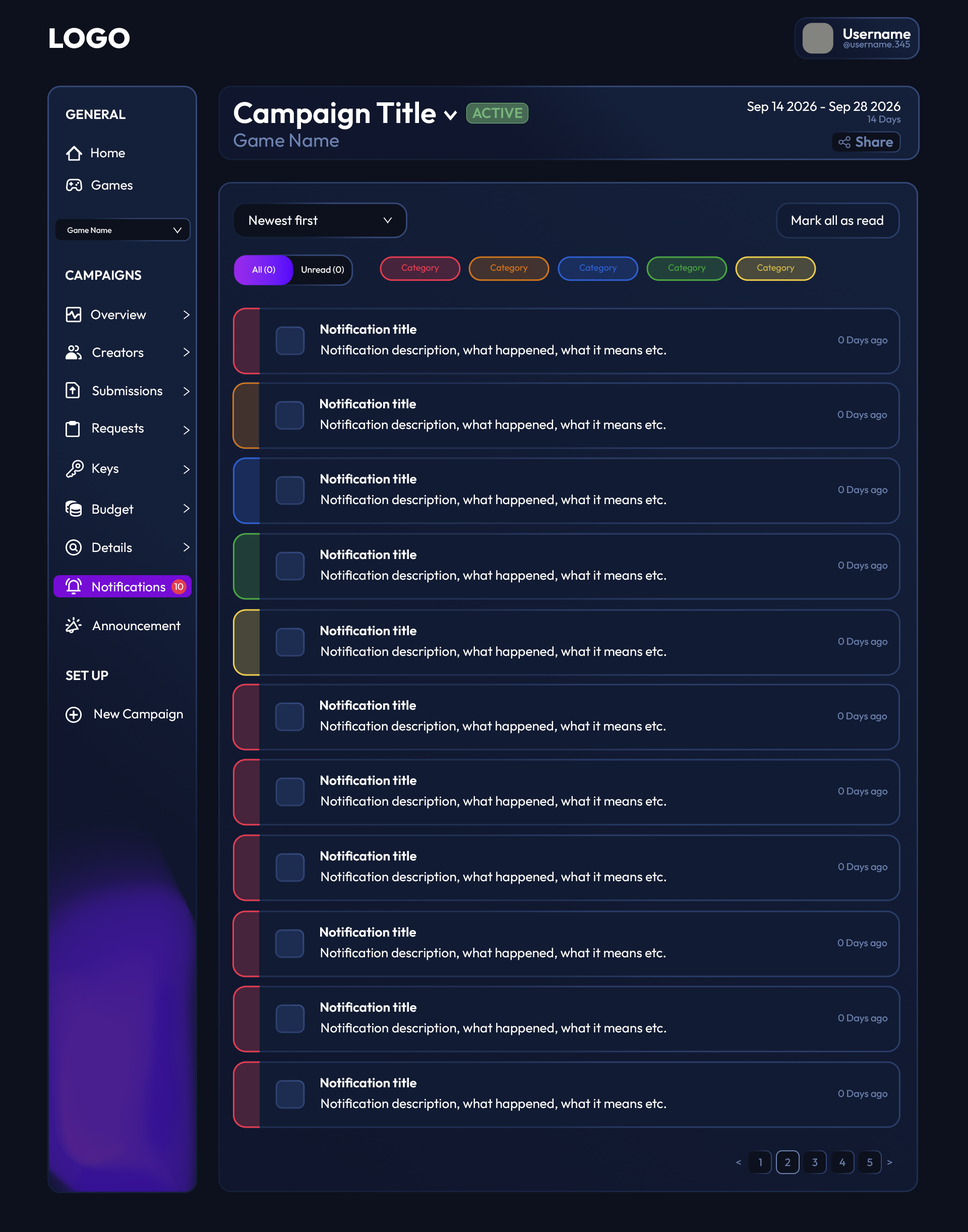
<style>
.page{position:relative;width:968px;height:1232px;background:#111b33}
.page>*{position:absolute;margin:0}
.t1{font:27.6px "Outfit-ExtraBold";color:#ffffff}
.t2{font:14.6px "Outfit-SemiBold";color:#ffffff}
.t3{font:9.4px "Outfit-Regular";color:#6d82b1}
.t4{font:29.4px "Outfit-SemiBold";color:#ffffff}
.t5{font:13.2px "Outfit-Regular";color:#ffffff}
.t6{font:13.2px "Outfit-SemiBold";color:#ffffff}
.t7{font:14.3px "Outfit-SemiBold";color:#78b47a}
.t8{font:9.9px "Outfit-Regular";color:#6d82b1}
.t9{font:18.9px "Outfit-Regular";color:#6d82b1}
.t10{font:14.3px "Outfit-SemiBold";color:#6d82b1}
.t11{font:7.9px "Outfit-Regular";color:#ffffff}
.t12{font:9px "Outfit-Regular";color:#ffffff}
.t13{font:9px "Outfit-Regular";color:#e33d51}
.t14{font:9px "Outfit-Regular";color:#cf751d}
.t15{font:9px "Outfit-Regular";color:#2f60d0}
.t16{font:9px "Outfit-Regular";color:#4aa342}
.t17{font:9px "Outfit-Regular";color:#d1b74a}
.t18{font:9.3px "Outfit-Regular";color:#ffffff}
.t19{font:10.6px "Outfit-Regular";color:#6d82b1}
</style>
<div class="page">
<p class="t1" style="left:49px;top:28px;width:81px;height:20px">LOGO</p>
<p class="t2" style="left:843px;top:28px;width:67px;height:11px">Username</p>
<p class="t3" style="left:843px;top:40px;width:67px;height:8px">@username.345</p>
<p class="t4" style="left:234px;top:101px;width:202px;height:29px">Campaign Title</p>
<p class="t5" style="left:747px;top:101px;width:153px;height:13px">Sep 14 2026 - Sep 28 2026</p>
<p class="t6" style="left:66px;top:109px;width:60px;height:10px">GENERAL</p>
<p class="t7" style="left:472px;top:107px;width:50px;height:11px">ACTIVE</p>
<p class="t8" style="left:867px;top:115px;width:34px;height:10px">14 Days</p>
<p class="t9" style="left:233px;top:133px;width:106px;height:14px">Game Name</p>
<p class="t10" style="left:855px;top:136px;width:38px;height:11px">Share</p>
<p class="t5" style="left:91px;top:148px;width:34px;height:10px">Home</p>
<p class="t5" style="left:91px;top:180px;width:42px;height:10px">Games</p>
<p class="t5" style="left:249px;top:215px;width:69px;height:10px">Newest first</p>
<p class="t5" style="left:791px;top:215px;width:92px;height:10px">Mark all as read</p>
<p class="t11" style="left:67px;top:227px;width:45px;height:6px">Game Name</p>
<p class="t12" style="left:252px;top:266px;width:23px;height:8px">All (0)</p>
<p class="t12" style="left:301px;top:266px;width:43px;height:8px">Unread (0)</p>
<p class="t13" style="left:401px;top:264px;width:38px;height:9px">Category</p>
<p class="t14" style="left:490px;top:264px;width:38px;height:9px">Category</p>
<p class="t15" style="left:579px;top:264px;width:38px;height:9px">Category</p>
<p class="t16" style="left:668px;top:264px;width:38px;height:9px">Category</p>
<p class="t17" style="left:757px;top:264px;width:37px;height:9px">Category</p>
<p class="t6" style="left:66px;top:270px;width:75px;height:10px">CAMPAIGNS</p>
<p class="t5" style="left:91px;top:310px;width:55px;height:10px">Overview</p>
<p class="t6" style="left:321px;top:324px;width:95px;height:10px">Notification title</p>
<p class="t8" style="left:838px;top:336px;width:50px;height:10px">0 Days ago</p>
<p class="t5" style="left:92px;top:347px;width:52px;height:10px">Creators</p>
<p class="t5" style="left:321px;top:345px;width:345px;height:12px">Notification description, what happened, what it means etc.</p>
<p class="t5" style="left:92px;top:386px;width:70px;height:10px">Submissions</p>
<p class="t6" style="left:320px;top:398px;width:96px;height:11px">Notification title</p>
<p class="t8" style="left:837px;top:411px;width:50px;height:9px">0 Days ago</p>
<p class="t5" style="left:92px;top:423px;width:52px;height:13px">Requests</p>
<p class="t5" style="left:321px;top:419px;width:344px;height:13px">Notification description, what happened, what it means etc.</p>
<p class="t5" style="left:92px;top:463px;width:26px;height:13px">Keys</p>
<p class="t6" style="left:321px;top:473px;width:95px;height:11px">Notification title</p>
<p class="t8" style="left:838px;top:486px;width:50px;height:10px">0 Days ago</p>
<p class="t5" style="left:321px;top:495px;width:345px;height:12px">Notification description, what happened, what it means etc.</p>
<p class="t5" style="left:92px;top:504px;width:42px;height:13px">Budget</p>
<p class="t5" style="left:92px;top:542px;width:40px;height:10px">Details</p>
<p class="t6" style="left:321px;top:549px;width:95px;height:11px">Notification title</p>
<p class="t8" style="left:838px;top:562px;width:50px;height:9px">0 Days ago</p>
<p class="t5" style="left:92px;top:582px;width:73px;height:10px">Notifications</p>
<p class="t5" style="left:321px;top:570px;width:345px;height:13px">Notification description, what happened, what it means etc.</p>
<p class="t18" style="left:174px;top:583px;width:9px;height:7px">10</p>
<p class="t5" style="left:92px;top:621px;width:88px;height:10px">Announcement</p>
<p class="t6" style="left:321px;top:625px;width:95px;height:11px">Notification title</p>
<p class="t8" style="left:838px;top:638px;width:50px;height:9px">0 Days ago</p>
<p class="t5" style="left:321px;top:646px;width:345px;height:13px">Notification description, what happened, what it means etc.</p>
<p class="t6" style="left:66px;top:670px;width:42px;height:11px">SET UP</p>
<p class="t6" style="left:320px;top:700px;width:96px;height:10px">Notification title</p>
<p class="t5" style="left:94px;top:709px;width:89px;height:12px">New Campaign</p>
<p class="t8" style="left:837px;top:712px;width:50px;height:10px">0 Days ago</p>
<p class="t5" style="left:321px;top:721px;width:344px;height:12px">Notification description, what happened, what it means etc.</p>
<p class="t6" style="left:321px;top:775px;width:95px;height:10px">Notification title</p>
<p class="t5" style="left:321px;top:796px;width:345px;height:13px">Notification description, what happened, what it means etc.</p>
<p class="t8" style="left:838px;top:787px;width:50px;height:10px">0 Days ago</p>
<p class="t6" style="left:321px;top:850px;width:95px;height:11px">Notification title</p>
<p class="t8" style="left:838px;top:863px;width:50px;height:10px">0 Days ago</p>
<p class="t5" style="left:321px;top:872px;width:345px;height:12px">Notification description, what happened, what it means etc.</p>
<p class="t6" style="left:320px;top:927px;width:96px;height:10px">Notification title</p>
<p class="t8" style="left:837px;top:939px;width:50px;height:10px">0 Days ago</p>
<p class="t5" style="left:321px;top:948px;width:344px;height:12px">Notification description, what happened, what it means etc.</p>
<p class="t6" style="left:321px;top:1002px;width:95px;height:10px">Notification title</p>
<p class="t5" style="left:321px;top:1023px;width:345px;height:12px">Notification description, what happened, what it means etc.</p>
<p class="t8" style="left:838px;top:1014px;width:50px;height:10px">0 Days ago</p>
<p class="t6" style="left:321px;top:1077px;width:95px;height:11px">Notification title</p>
<p class="t8" style="left:838px;top:1090px;width:50px;height:9px">0 Days ago</p>
<p class="t5" style="left:321px;top:1098px;width:345px;height:13px">Notification description, what happened, what it means etc.</p>
<p class="t19" style="left:736px;top:1160px;width:5px;height:5px">&lt;</p>
<p class="t19" style="left:759px;top:1158px;width:3px;height:8px">1</p>
<p class="t19" style="left:785px;top:1158px;width:5px;height:8px">2</p>
<p class="t19" style="left:812px;top:1158px;width:6px;height:8px">3</p>
<p class="t19" style="left:839px;top:1158px;width:6px;height:8px">4</p>
<p class="t19" style="left:867px;top:1158px;width:6px;height:8px">5</p>
<p class="t19" style="left:887px;top:1160px;width:5px;height:5px">&gt;</p>
</div>
